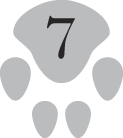
<style>
.page{position:relative;width:123px;height:138px;background:#bbbcbe}
.page>*{position:absolute;margin:0}
.t1{font:74.3px "BellMT";color:#272525}
</style>
<div class="page">
<p class="t1" style="left:47px;top:15px;width:28px;height:44px">7</p>
</div>
